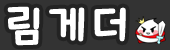
<style>
.page{position:relative;width:170px;height:50px;background:#333333}
.page>*{position:absolute;margin:0}
.t1{font:41.8px "MaplestoryLight";letter-spacing:0.12em;color:#ffffff;font-weight:bold}
</style>
<div class="page">
<p class="t1" style="left:7px;top:6px;width:119px;height:40px">림게더</p>
</div>
